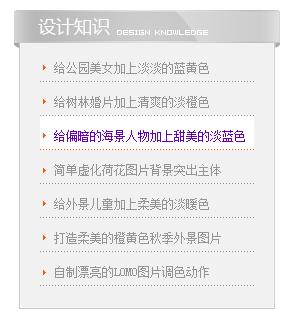
<style>
.page{position:relative;width:293px;height:328px;background:#f1f1f1}
.page>*{position:absolute;margin:0}
.t1{font:18px "MicrosoftYaHei";color:#ffffff;text-transform:uppercase}
.t2{font:8px "04b08";color:#ffffff;text-transform:uppercase}
.t3{font:12px/34px "SimSun";color:#959595;text-transform:uppercase}
.t4{font:12px/34px "SimSun";color:#6600b5;text-transform:uppercase}
</style>
<div class="page">
<p class="t1" style="left:38px;top:18px;width:72px;height:17px">设计知识</p>
<p class="t2" style="left:117px;top:30px;width:91px;height:5px">Design knowledge</p>
<p class="t3" style="left:54px;top:62px;width:191px;height:216px">给公园美女加上淡淡的蓝黄色<br>给树林婚片加上清爽的淡橙色<br><span class="t4">给偏暗的海景人物加上甜美的淡蓝色<br></span>简单虚化荷花图片背景突出主体<br>给外景儿童加上柔美的淡暖色<br>打造柔美的橙黄色秋季外景图片<br>自制漂亮的Lomo图片调色动作<br>·Photoshop打造唯美的彩虹岛婚片[2012-9-15]</p>
</div>
